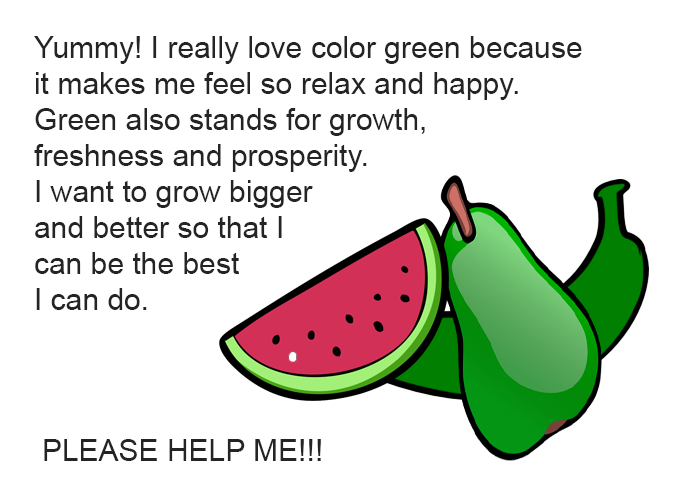
<style>
.page{position:relative;width:700px;height:500px;background:#ffffff}
.page>*{position:absolute;margin:0}
.t1{font:30px "ArialMT";color:#232523}
</style>
<div class="page">
<p class="t1" style="left:34px;top:36px;width:548px;height:274px">Yummy! I really love color green because <br>it makes me feel so relax and happy. <br>Green also stands for growth, <br>freshness and prosperity.<br>I want to grow bigger <br>and better so that I <br>can be the best <br>I can do.</p>
<p class="t1" style="left:44px;top:439px;width:277px;height:22px">PLEASE HELP ME!!!</p>
</div>
